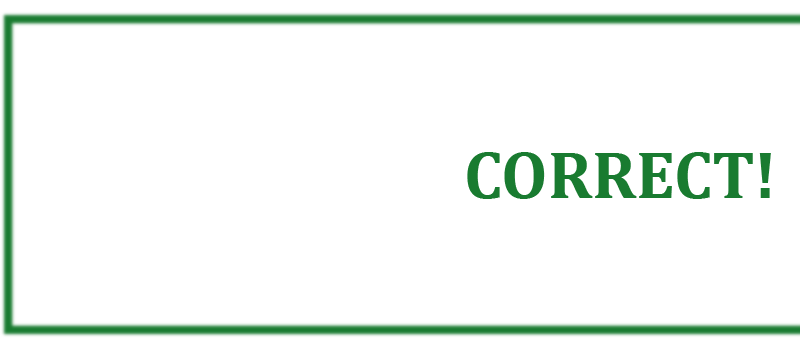
<style>
.page{position:relative;width:800px;height:350px;background:#ffffff}
.page>*{position:absolute;margin:0}
.t1{font:66.7px "Cambria-Bold";color:#197b30}
</style>
<div class="page">
<p class="t1" style="left:467px;top:152px;width:304px;height:47px">CORRECT!</p>
</div>
